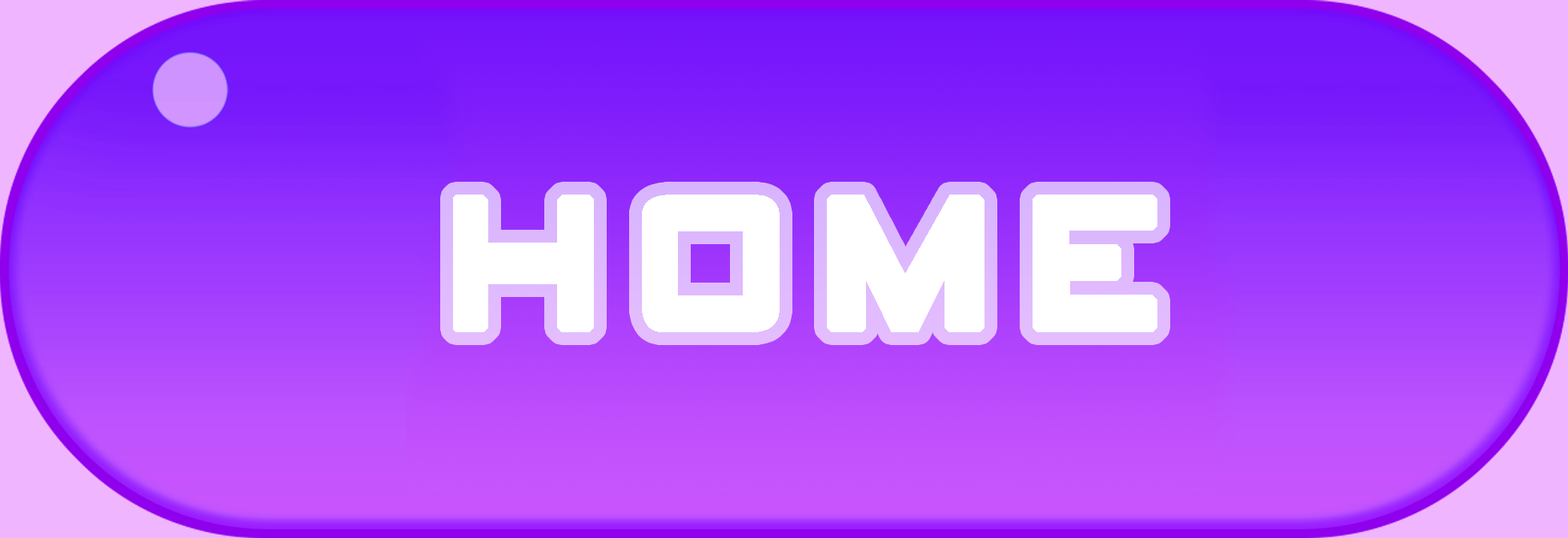
<style>
.page{position:relative;width:1568px;height:538px}
.page>*{position:absolute;margin:0}
.t1{font:160.3px "GAMECUBENDualSet";letter-spacing:0.2em;color:#ffffff;font-weight:bold;scale:0.85 1}
</style>
<div class="page">
<p class="t1" style="left:453px;top:194px;width:704px;height:138px">HOME</p>
</div>
